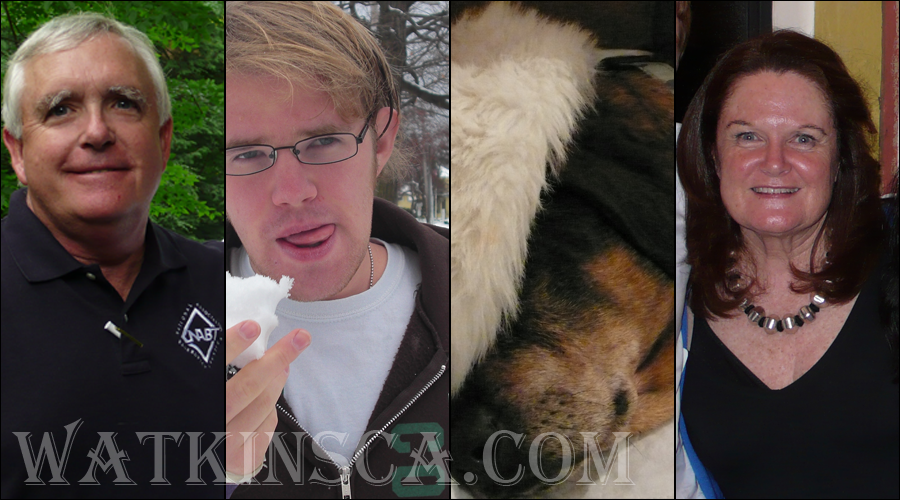
<style>
.page{position:relative;width:900px;height:500px}
.page>*{position:absolute;margin:0}
.t1{font:79.5px "Algerian";color:#666564}
</style>
<div class="page">
<p class="t1" style="left:11px;top:418px;width:625px;height:68px">WatkinsCA.com</p>
</div>
